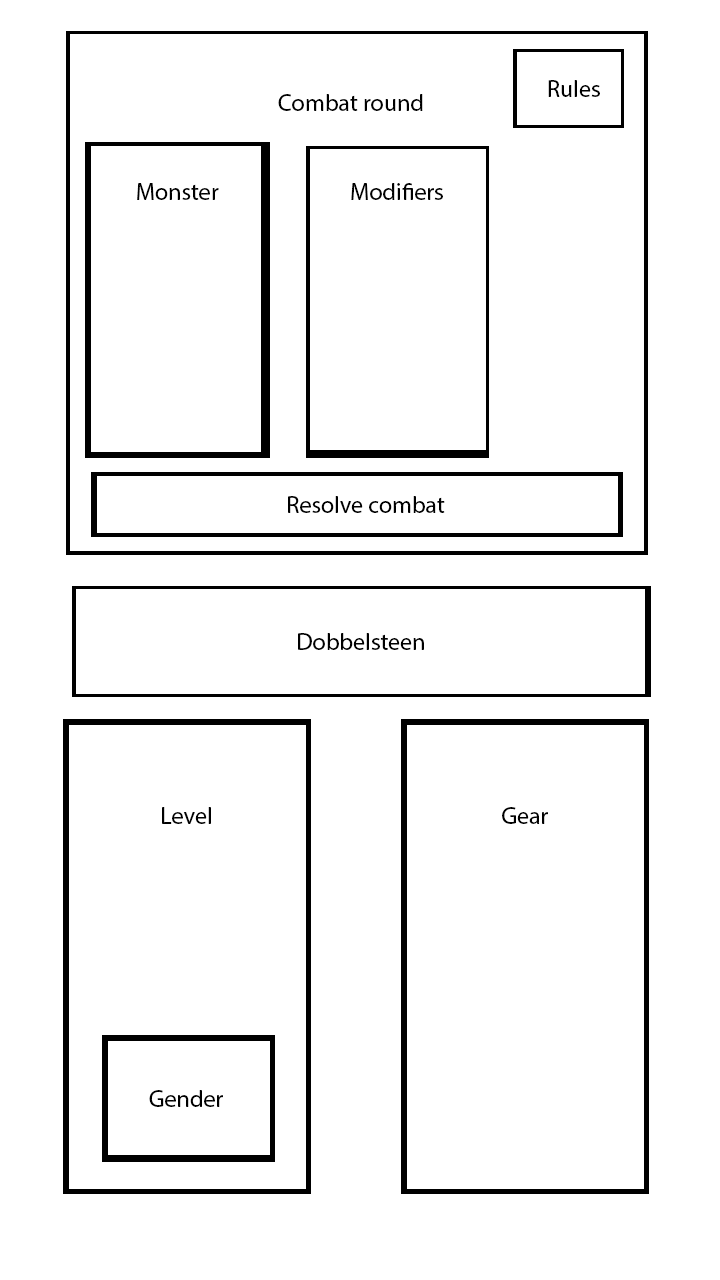
<style>
.page{position:relative;width:720px;height:1280px;background:#ffffff}
.page>*{position:absolute;margin:0}
.t1{font:24px "MyriadPro-Regular";color:#000000}
</style>
<div class="page">
<p class="t1" style="left:548px;top:80px;width:52px;height:17px">Rules</p>
<p class="t1" style="left:278px;top:94px;width:145px;height:17px">Combat round</p>
<p class="t1" style="left:137px;top:183px;width:82px;height:17px">Monster</p>
<p class="t1" style="left:351px;top:183px;width:92px;height:17px">Modifiers</p>
<p class="t1" style="left:288px;top:496px;width:157px;height:17px">Resolve combat</p>
<p class="t1" style="left:298px;top:633px;width:126px;height:17px">Dobbelsteen</p>
<p class="t1" style="left:162px;top:807px;width:49px;height:17px">Level</p>
<p class="t1" style="left:502px;top:807px;width:46px;height:17px">Gear</p>
<p class="t1" style="left:149px;top:1090px;width:74px;height:17px">Gender</p>
</div>
